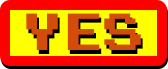
<style>
.page{position:relative;width:168px;height:69px;background:#ff0000}
.page>*{position:absolute;margin:0}
.t1{font:41.5px "PressStartReg";color:#d34c0a}
.t2{font:41.5px "PressStartReg"}
</style>
<div class="page">
<p class="t1" style="left:26px;top:13px;width:115px;height:37px">YES</p>
<p class="t2" style="left:28px;top:17px;width:115px;height:37px">YES</p>
</div>
